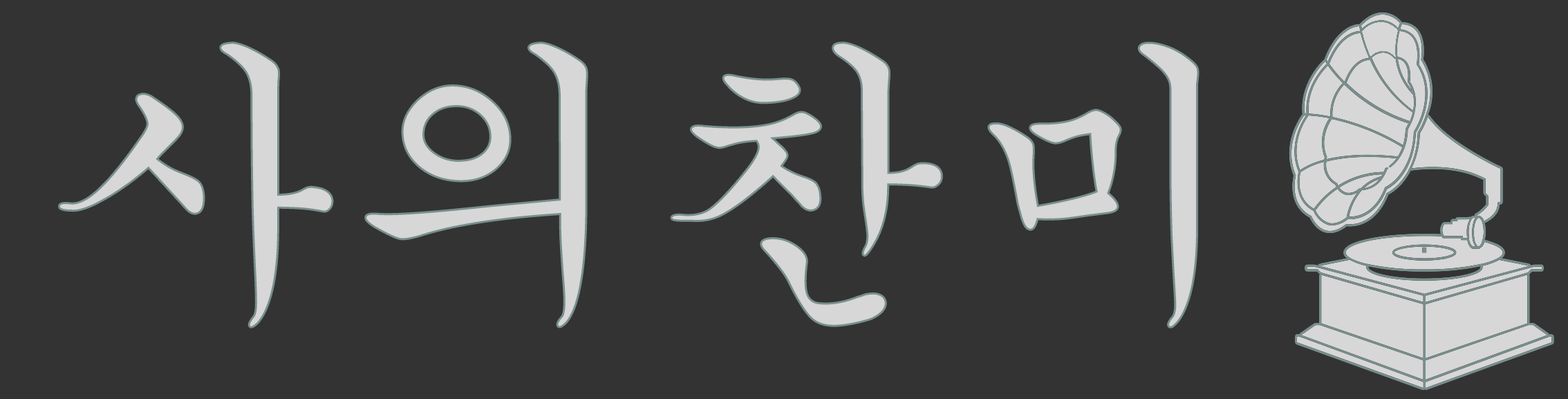
<style>
.page{position:relative;width:1568px;height:399px;background:#333333}
.page>*{position:absolute;margin:0}
.t1{font:305.5px "HYhaeseo";color:#d7d7d7}
</style>
<div class="page">
<p class="t1" style="left:60px;top:44px;width:1137px;height:282px">사의찬미</p>
</div>
